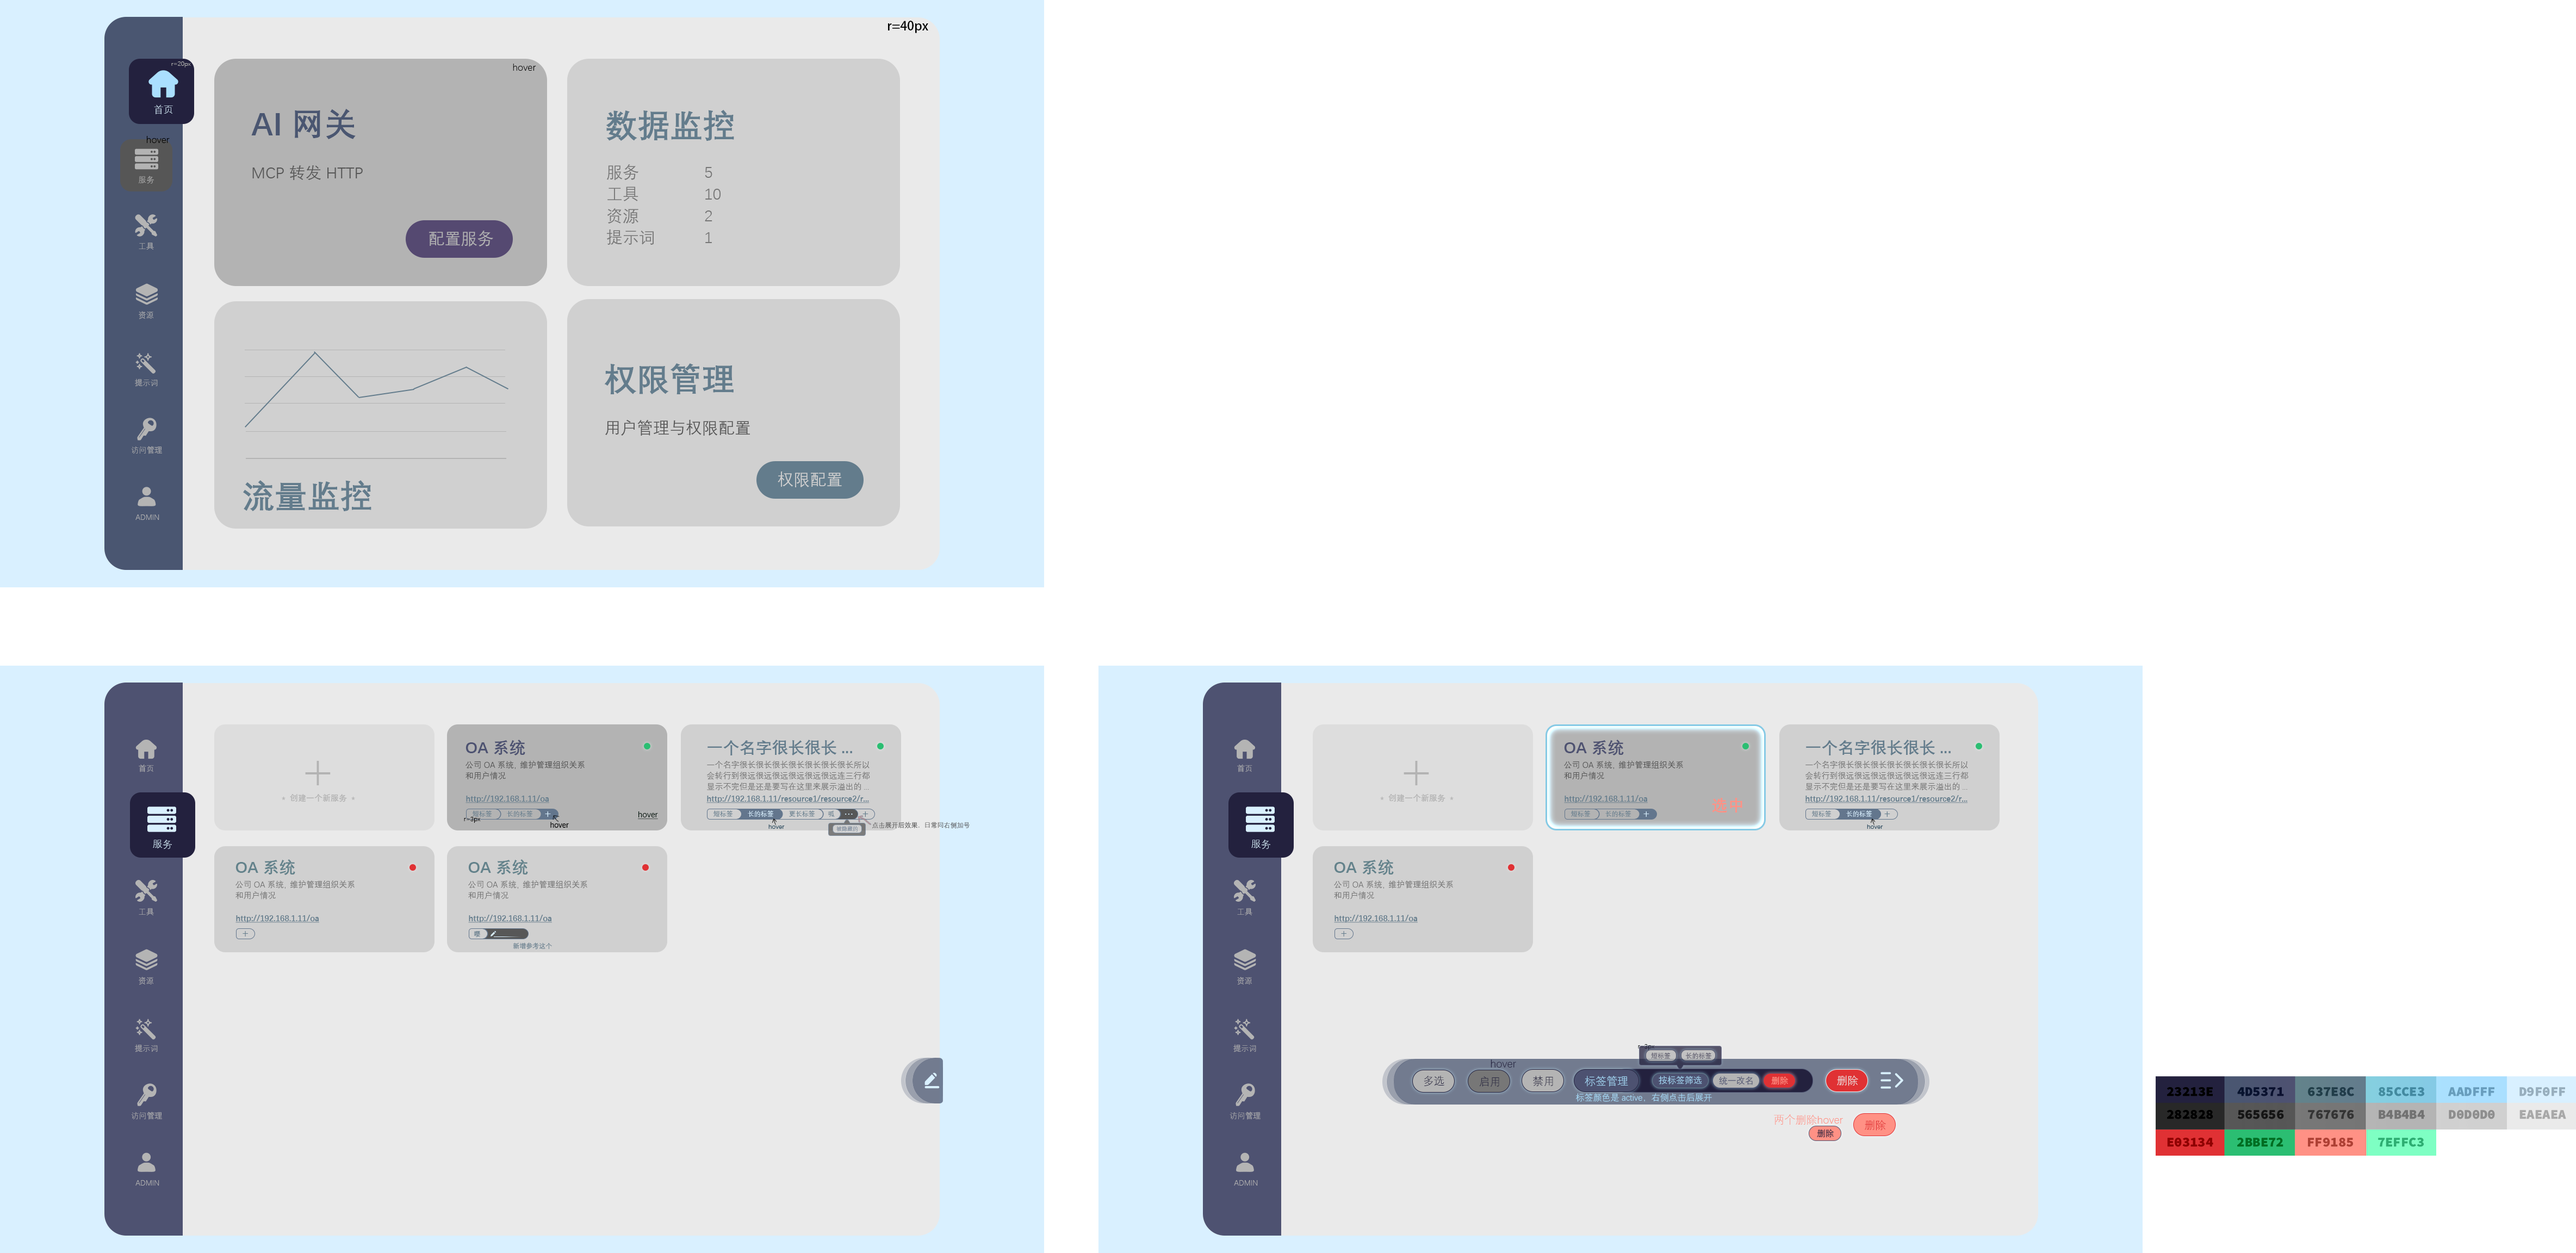
<style>
.page{position:relative;width:2576px;height:1253px;background:#ffffff}
.page>*{position:absolute;margin:0}
.t1{font:12.5px "AdobeHeitiStd-Regular";color:#000000}
.t2{font:6.5px "DengXian-Light";color:#b3b3b3}
.t3{font:9.8px "DengXian-Light";color:#000000}
.t4{font:9.8px "DengXian-Light";color:#d9f0ff}
.t5{font:16.3px "DengXian";color:#565656}
.t6{font:32.6px "DengXian-Bold";color:#4a5671}
.t7{font:32.6px "DengXian-Bold";color:#637c8c}
.t8{font:16.3px/21.8px "DengXian";color:#767676}
.t9{font:7.8px "DengXian-Light";color:#b4b4b4}
.t10{font:16.3px "DengXian";color:#b4b4b4}
.t11{font:16.3px "DengXian";color:#d0d0d0}
.t12{font:16.3px "DengXian-Bold";color:#4d5271}
.t13{font:16.3px "DengXian-Bold";color:#637c8c}
.t14{font:16.3px "DengXian-Bold";color:#4e5271}
.t15{font:54.4px "DengXian-Light";color:#b3b3b3}
.t16{font:8.2px/10.9px "DengXian";color:#565656}
.t17{font:8.2px/10.9px "DengXian";color:#757575}
.t18{font:8.2px "DengXian-Bold";color:#b3b3b3}
.t19{font:8.2px "DengXian-Bold";color:#637c8c;text-decoration:underline}
.t20{font:16.3px "DengXian-Bold";color:#ff9185}
.t21{font:6.5px "DengXian";color:#000000}
.t22{font:6.5px "DengXian";color:#637c8c}
.t23{font:10.9px "DengXian";color:#d9f0ff}
.t24{font:8.2px "DengXian";color:#00120a;text-decoration:underline}
.t25{font:6.5px "DengXian";color:#d9f0ff}
.t26{font:12.4px "DengXian";color:#d9f0ff}
.t27{font:10.9px "DengXian";color:#637c8c}
.t28{font:6.5px "DengXian";color:#575757}
.t29{font:5.4px "DengXian";color:#8593a4}
.t30{font:16.3px "DengXian-Bold";color:#63828b}
.t31{font:6.5px "DengXian"}
.t32{font:10.8px "DengXian-Light";color:#23213e}
.t33{font:10.9px "DengXian-Light";color:#23213e}
.t34{font:10.9px "DengXian-Light"}
.t35{font:10.9px "DengXian-Light";color:#aae0fe}
.t36{font:8.7px "DengXian-Light";color:#aae0fe}
.t37{font:8.7px "DengXian";color:#4d5271}
.t38{font:8.7px "DengXian";color:#ff9185}
.t39{font:10.8px "DengXian-Light";color:#eaeaea}
.t40{font:10.9px "DengXian-Light";color:#ff9185}
.t41{font:10.8px "DengXian-Light";color:#e03134}
.t42{font:8.7px "DengXian";color:#23213e}
</style>
<div class="page">
<p class="t1" style="left:888px;top:21px;width:40px;height:12px">r=40px</p>
<p class="t2" style="left:171px;top:61px;width:20px;height:6px">r=20px</p>
<p class="t3" style="left:513px;top:64px;width:23px;height:7px">hover</p>
<p class="t4" style="left:154px;top:105px;width:19px;height:9px">首页</p>
<p class="t5" style="left:251px;top:109px;width:112px;height:71px"><span class="t6">AI 网关<br></span>MCP 转发 HTTP</p>
<p class="t7" style="left:606px;top:110px;width:128px;height:31px">数据监控</p>
<p class="t3" style="left:147px;top:136px;width:23px;height:7px">hover</p>
<p class="t8" style="left:606px;top:164px;width:115px;height:81px">服务    5<br>工具    10<br>资源    2<br>提示词   1</p>
<p class="t9" style="left:139px;top:176px;width:15px;height:8px">服务</p>
<p class="t10" style="left:429px;top:231px;width:64px;height:15px">配置服务</p>
<p class="t9" style="left:139px;top:243px;width:15px;height:7px">工具</p>
<p class="t9" style="left:139px;top:311px;width:14px;height:8px">资源</p>
<p class="t5" style="left:604px;top:363px;width:146px;height:73px"><span class="t7">权限管理<br></span>用户管理与权限配置</p>
<p class="t9" style="left:135px;top:378px;width:23px;height:9px">提示词</p>
<p class="t9" style="left:131px;top:446px;width:31px;height:8px">访问管理</p>
<p class="t11" style="left:778px;top:471px;width:64px;height:16px">权限配置</p>
<p class="t7" style="left:243px;top:480px;width:128px;height:31px">流量监控</p>
<p class="t9" style="left:135px;top:514px;width:24px;height:6px">ADMIN</p>
<p class="t12" style="left:465px;top:740px;width:60px;height:15px">OA 系统</p>
<p class="t13" style="left:707px;top:740px;width:145px;height:15px">一个名字很长很长...</p>
<p class="t14" style="left:1564px;top:740px;width:60px;height:15px">OA 系统</p>
<p class="t13" style="left:1806px;top:740px;width:145px;height:15px">一个名字很长很长...</p>
<p class="t15" style="left:305px;top:761px;width:26px;height:24px">+</p>
<p class="t16" style="left:465px;top:761px;width:120px;height:19px">公司 OA 系统， 维护管理组织关系<br>和用户情况</p>
<p class="t17" style="left:707px;top:761px;width:163px;height:30px">一个名字很长很长很长很长很长很长很长所以<br>会转行到很远很远很远很远很远很远连三行都<br>显示不完但是还是要写在这里来展示溢出的...</p>
<p class="t15" style="left:1404px;top:761px;width:25px;height:24px">+</p>
<p class="t16" style="left:1564px;top:761px;width:119px;height:19px">公司 OA 系统， 维护管理组织关系<br>和用户情况</p>
<p class="t17" style="left:1805px;top:761px;width:164px;height:30px">一个名字很长很长很长很长很长很长很长所以<br>会转行到很远很远很远很远很远很远连三行都<br>显示不完但是还是要写在这里来展示溢出的...</p>
<p class="t9" style="left:139px;top:764px;width:15px;height:8px">首页</p>
<p class="t9" style="left:1237px;top:764px;width:15px;height:8px">首页</p>
<p class="t18" style="left:282px;top:794px;width:73px;height:8px">*  创建一个新服务  *</p>
<p class="t19" style="left:465px;top:795px;width:84px;height:8px">http://192.168.1.11/oa</p>
<p class="t19" style="left:706px;top:795px;width:164px;height:8px">http://192.168.1.11/resource1/resource2/r...</p>
<p class="t18" style="left:1380px;top:794px;width:74px;height:8px">*  创建一个新服务  *</p>
<p class="t19" style="left:1564px;top:795px;width:84px;height:8px">http://192.168.1.11/oa</p>
<p class="t20" style="left:1712px;top:798px;width:30px;height:14px">选中</p>
<p class="t19" style="left:1805px;top:795px;width:163px;height:8px">http://192.168.1.11/resource1/resource2/r...</p>
<p class="t21" style="left:464px;top:817px;width:17px;height:6px">r=3px</p>
<p class="t22" style="left:473px;top:810px;width:19px;height:7px">短标签</p>
<p class="t22" style="left:507px;top:810px;width:26px;height:7px">长的标签</p>
<p class="t23" style="left:545px;top:811px;width:6px;height:6px">+</p>
<p class="t24" style="left:638px;top:811px;width:20px;height:9px">hover</p>
<p class="t22" style="left:713px;top:810px;width:20px;height:7px">短标签</p>
<p class="t25" style="left:748px;top:810px;width:26px;height:7px">长的标签</p>
<p class="t22" style="left:789px;top:810px;width:26px;height:7px">更长标签</p>
<p class="t22" style="left:828px;top:811px;width:7px;height:6px">呱</p>
<p class="t26" style="left:845px;top:814px;width:8px;height:1px">…</p>
<p class="t27" style="left:862px;top:811px;width:6px;height:6px">+</p>
<p class="t28" style="left:872px;top:822px;width:98px;height:6px">点击展开后效果，日常同右侧加号</p>
<p class="t22" style="left:1571px;top:810px;width:20px;height:7px">短标签</p>
<p class="t22" style="left:1605px;top:810px;width:26px;height:7px">长的标签</p>
<p class="t23" style="left:1643px;top:811px;width:6px;height:6px">+</p>
<p class="t22" style="left:1812px;top:810px;width:20px;height:7px">短标签</p>
<p class="t25" style="left:1846px;top:810px;width:26px;height:7px">长的标签</p>
<p class="t27" style="left:1884px;top:811px;width:6px;height:6px">+</p>
<p class="t29" style="left:836px;top:826px;width:22px;height:5px">被隐藏的</p>
<p class="t4" style="left:153px;top:840px;width:19px;height:9px">服务</p>
<p class="t4" style="left:1251px;top:840px;width:19px;height:9px">服务</p>
<p class="t30" style="left:235px;top:859px;width:60px;height:16px">OA 系统</p>
<p class="t30" style="left:468px;top:859px;width:60px;height:16px">OA 系统</p>
<p class="t30" style="left:1334px;top:859px;width:60px;height:16px">OA 系统</p>
<p class="t17" style="left:235px;top:880px;width:120px;height:19px">公司 OA 系统， 维护管理组织关系<br>和用户情况</p>
<p class="t17" style="left:468px;top:880px;width:119px;height:19px">公司 OA 系统， 维护管理组织关系<br>和用户情况</p>
<p class="t17" style="left:1334px;top:880px;width:119px;height:19px">公司 OA 系统， 维护管理组织关系<br>和用户情况</p>
<p class="t9" style="left:139px;top:908px;width:15px;height:7px">工具</p>
<p class="t19" style="left:235px;top:915px;width:84px;height:8px">http://192.168.1.11/oa</p>
<p class="t19" style="left:468px;top:915px;width:84px;height:8px">http://192.168.1.11/oa</p>
<p class="t9" style="left:1237px;top:908px;width:15px;height:7px">工具</p>
<p class="t19" style="left:1334px;top:915px;width:84px;height:8px">http://192.168.1.11/oa</p>
<p class="t27" style="left:243px;top:931px;width:5px;height:5px">+</p>
<p class="t22" style="left:474px;top:931px;width:6px;height:7px">嘤</p>
<p class="t27" style="left:1341px;top:931px;width:5px;height:5px">+</p>
<p class="t22" style="left:513px;top:942px;width:39px;height:7px">新增参考这个</p>
<p class="t9" style="left:139px;top:977px;width:14px;height:8px">资源</p>
<p class="t9" style="left:1237px;top:977px;width:15px;height:8px">资源</p>
<p class="t9" style="left:135px;top:1044px;width:23px;height:8px">提示词</p>
<p class="t9" style="left:1233px;top:1044px;width:23px;height:8px">提示词</p>
<p class="t31" style="left:1638px;top:1044px;width:17px;height:6px">r=3px</p>
<p class="t32" style="left:1491px;top:1059px;width:25px;height:9px">hover</p>
<p class="t31" style="left:1651px;top:1052px;width:20px;height:7px">短标签</p>
<p class="t31" style="left:1685px;top:1052px;width:26px;height:7px">长的标签</p>
<p class="t33" style="left:1424px;top:1076px;width:21px;height:10px">多选</p>
<p class="t32" style="left:1479px;top:1076px;width:20px;height:11px">启用</p>
<p class="t34" style="left:1533px;top:1076px;width:20px;height:11px">禁用</p>
<p class="t35" style="left:1585px;top:1076px;width:43px;height:11px">标签管理</p>
<p class="t36" style="left:1659px;top:1076px;width:43px;height:8px">按标签筛选</p>
<p class="t37" style="left:1719px;top:1076px;width:34px;height:9px">统一改名</p>
<p class="t38" style="left:1771px;top:1076px;width:17px;height:9px">删除</p>
<p class="t39" style="left:1837px;top:1075px;width:21px;height:11px">删除</p>
<p class="t36" style="left:1576px;top:1093px;width:136px;height:9px">标签颜色是 active，右侧点击后展开</p>
<p class="t9" style="left:131px;top:1112px;width:31px;height:8px">访问管理</p>
<p class="t9" style="left:1230px;top:1112px;width:31px;height:8px">访问管理</p>
<p class="t40" style="left:1774px;top:1114px;width:69px;height:11px">两个删除hover</p>
<p class="t41" style="left:1865px;top:1120px;width:21px;height:11px">删除</p>
<p class="t42" style="left:1817px;top:1129px;width:17px;height:9px">删除</p>
<p class="t9" style="left:135px;top:1180px;width:24px;height:5px">ADMIN</p>
<p class="t9" style="left:1234px;top:1180px;width:24px;height:5px">ADMIN</p>
</div>
